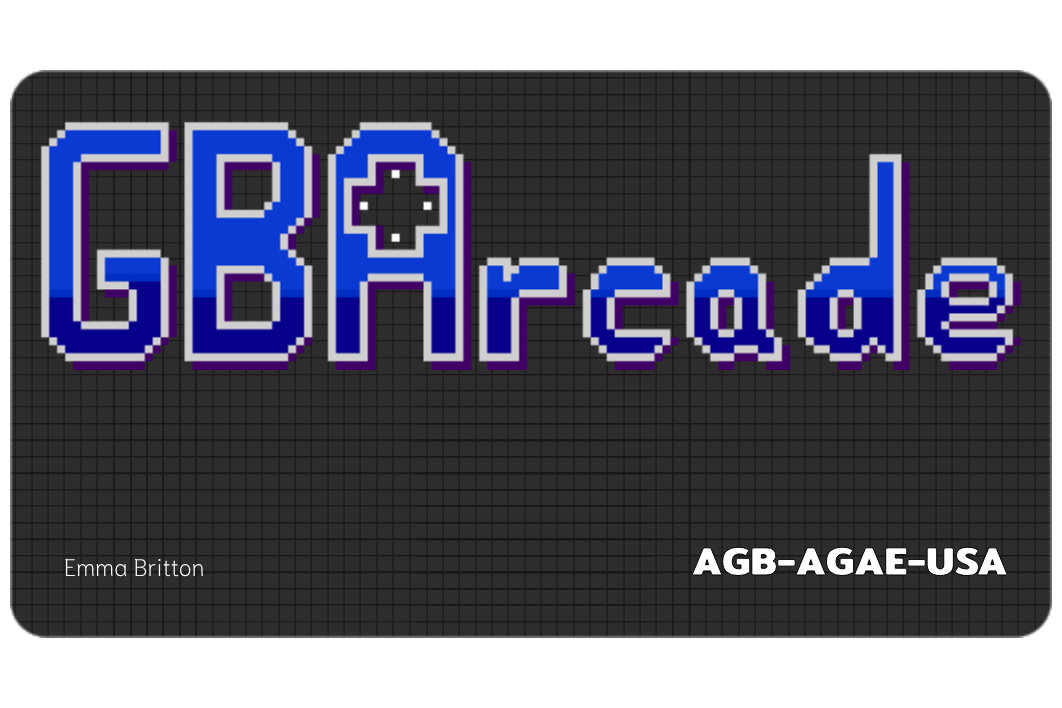
<style>
.page{position:relative;width:1062px;height:708px;background:#2d2d2d}
.page>*{position:absolute;margin:0}
.t1{font:40px "Mitr-Bold";color:#ffffff}
.t2{font:24px "Niramit-ExtraLight";color:#ffffff}
</style>
<div class="page">
<p class="t1" style="left:690px;top:545px;width:319px;height:33px">AGB-AGAE-USA</p>
<p class="t2" style="left:65px;top:558px;width:139px;height:19px">Emma Britton</p>
</div>
